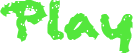
<style>
.page{position:relative;width:133px;height:53px;background:#ffffff}
.page>*{position:absolute;margin:0}
.t1{font:50px "squeakychalksound";color:#54e73c}
</style>
<div class="page">
<p class="t1" style="left:0px;top:0px;width:133px;height:53px">Play</p>
</div>
